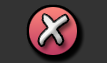
<style>
.page{position:relative;width:107px;height:63px;background:#333333}
.page>*{position:absolute;margin:0}
.t1{font:42.7px "PermanentMarker"}
</style>
<div class="page">
<p class="t1" style="left:38px;top:14px;width:31px;height:33px">X</p>
<p class="t1" style="left:38px;top:14px;width:31px;height:33px">X</p>
</div>
